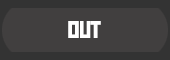
<style>
.page{position:relative;width:170px;height:60px;background:#413f3f}
.page>*{position:absolute;margin:0}
.t1{font:24px "PixelCyr-Normal";color:#ffffff}
</style>
<div class="page">
<p class="t1" style="left:68px;top:21px;width:33px;height:17px">OUT</p>
</div>
